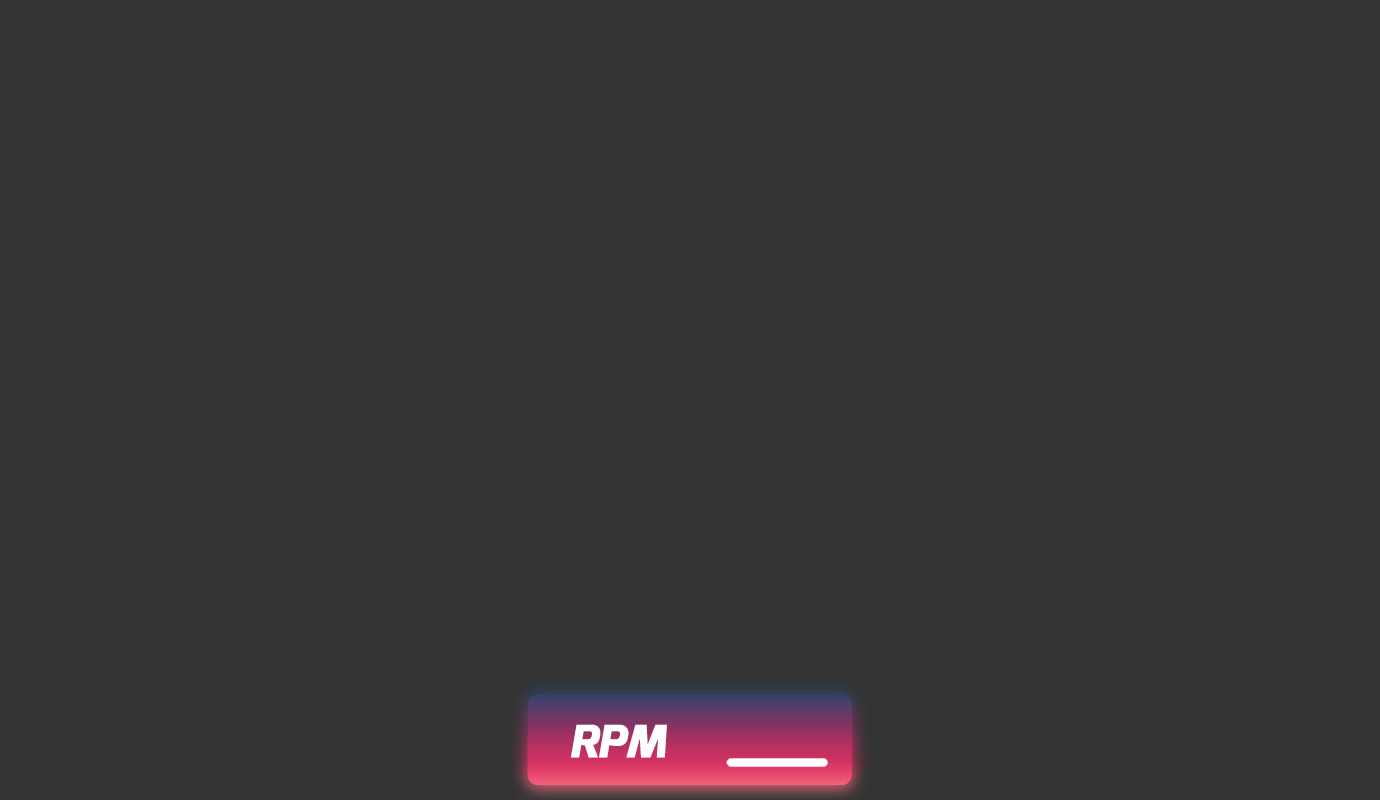
<style>
.page{position:relative;width:1380px;height:800px;background:#333333}
.page>*{position:absolute;margin:0}
.t1{font:44.5px "Exo-ExtraBoldItalic";letter-spacing:-0.02em;color:#ffffff;scale:1.08 1}
</style>
<div class="page">
<p class="t1" style="left:571px;top:724px;width:96px;height:34px">RPM</p>
</div>
